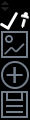
<style>
.page{position:relative;width:30px;height:120px;background:#000000}
.page>*{position:absolute;margin:0}
.t1{font:30px "MyriadPro-Regular";letter-spacing:0.008em;color:#76808d}
</style>
<div class="page">
<p class="t1" style="left:6px;top:67px;width:17px;height:16px">+</p>
</div>
